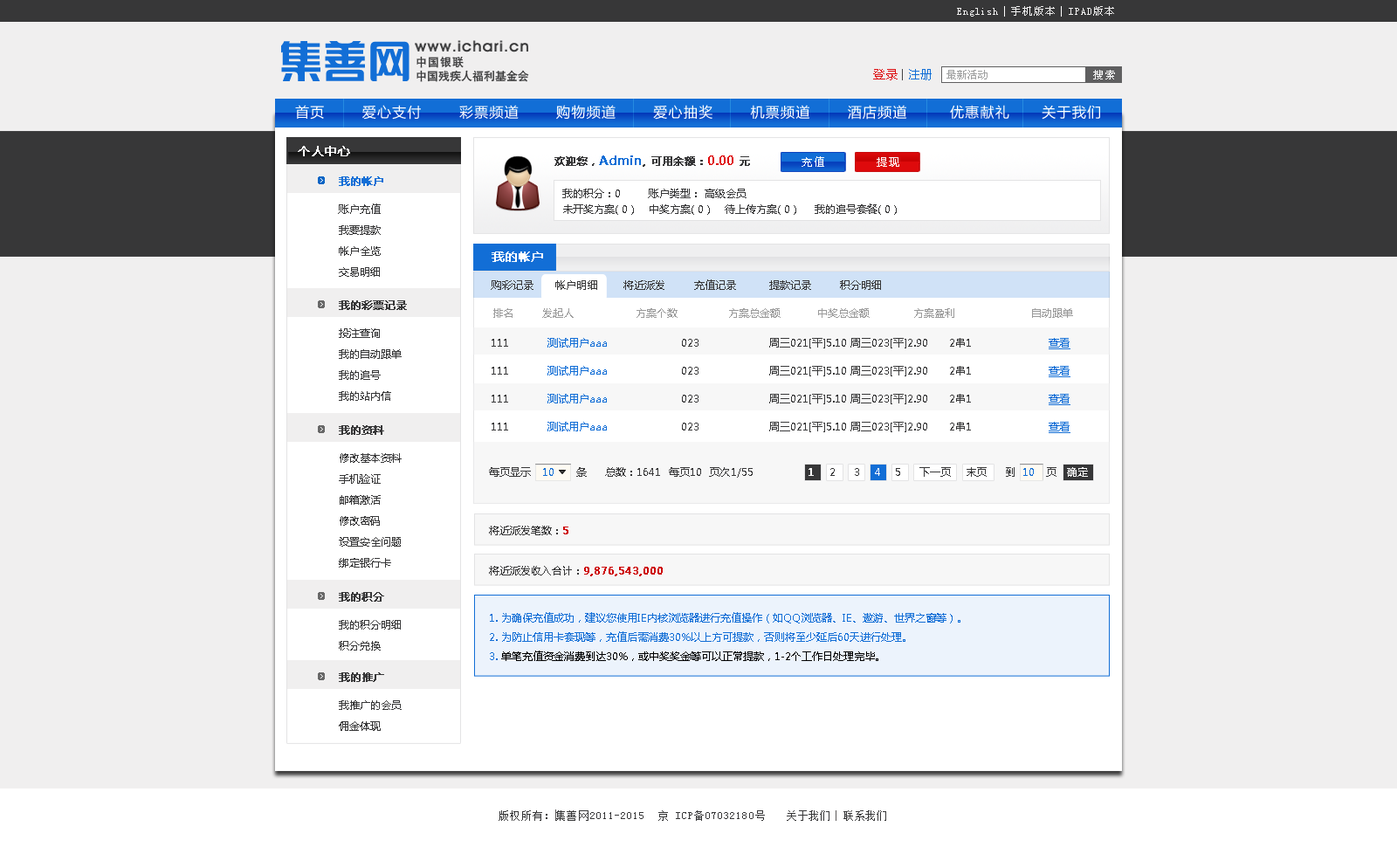
<style>
.page{position:relative;width:1397px;height:854px;background:#f0efef}
.page>*{position:absolute;margin:0}
.t1{font:10.5px "SimSun";letter-spacing:0.09em;color:#f0efef}
.t2{font:10.5px "SimSun";letter-spacing:0.07em;color:#f0efef}
.t3{font:11.3px "HeitiCSEG-Medium-GB";letter-spacing:0.08em;color:#373738}
.t4{font:11.3px "HeitiCSEG-Medium-GB";color:#373738}
.t5{font:12.2px "FZLTXHK--GBK1-0";letter-spacing:0.01em;color:#dd0a0d}
.t6{font:11.3px "FZLTXHK--GBK1-0";letter-spacing:0.01em;color:#434344}
.t7{font:12.2px "FZLTXHK--GBK1-0";letter-spacing:0.01em;color:#126ed6}
.t8{font:10.5px "SimSun";color:#9fa0a0}
.t9{font:10.5px "SimSun";letter-spacing:0.16em;color:#ffffff}
.t10{font:14px "MicrosoftYaHei";letter-spacing:0.08em;color:#ffffff}
.t11{font:12.2px "MicrosoftYaHei";color:#ffffff;font-weight:bold}
.t12{font:10.5px "MicrosoftYaHei";color:#373738;font-weight:bold}
.t13{font:12.2px "MicrosoftYaHei";color:#126ed6;font-weight:bold}
.t14{font:12.2px "MicrosoftYaHei";color:#de0a0c;font-weight:bold}
.t15{font:10.5px "MicrosoftYaHei";letter-spacing:0.14em;color:#ffffff}
.t16{font:10.5px "MicrosoftYaHei";color:#126ed6;font-weight:bold}
.t17{font:10.5px/15.7px "MicrosoftYaHei";color:#373738}
.t18{font:10.5px/21px "MicrosoftYaHei";color:#373738}
.t19{font:12.2px "MicrosoftYaHei";letter-spacing:0.01em;color:#ffffff;font-weight:bold}
.t20{font:10.5px "MicrosoftYaHei";letter-spacing:0.01em;color:#373738}
.t21{font:10.5px "MicrosoftYaHei";letter-spacing:0.01em;color:#9b9b9b}
.t22{font:10.5px "MicrosoftYaHei";color:#373738}
.t23{font:10.5px "MicrosoftYaHei";color:#126ed6}
.t24{font:10.5px "MicrosoftYaHei";color:#126ed6;text-decoration:underline}
.t25{font:10.5px "MicrosoftYaHei";letter-spacing:0.01em;color:#126ed6}
.t26{font:10.5px "MicrosoftYaHei";letter-spacing:0.01em;color:#ffffff;font-weight:bold}
.t27{font:10.5px "MicrosoftYaHei";letter-spacing:0.01em;color:#ffffff}
.t28{font:10.5px "MicrosoftYaHei";color:#cd0406;font-weight:bold}
.t29{font:10.5px/19.2px "MicrosoftYaHei";color:#126ed6}
.t30{font:10.5px/19.2px "MicrosoftYaHei";color:#000000}
.t31{font:10.5px "SimSun";letter-spacing:0.09em;color:#373738}
.t32{font:10.5px "SimSun";letter-spacing:0.07em;color:#373738}
</style>
<div class="page">
<p class="t1" style="left:957px;top:6px;width:157px;height:11px"><span class="t2">English  </span>手机版本  IPAD版本</p>
<p class="t3" style="left:416px;top:56px;width:48px;height:12px">中国银联</p>
<p class="t4" style="left:416px;top:70px;width:113px;height:12px">中国残疾人福利基金会</p>
<p class="t5" style="left:873px;top:69px;width:58px;height:11px">登录 <span class="t6">| </span><span class="t7">注册</span></p>
<p class="t8" style="left:946px;top:70px;width:41px;height:9px">最新活动</p>
<p class="t9" style="left:1093px;top:70px;width:22px;height:9px">搜索</p>
<p class="t10" style="left:295px;top:105px;width:805px;height:15px">首页       爱心支付       彩票频道       购物频道       爱心抽奖       机票频道       酒店频道        优惠献礼      关于我们</p>
<p class="t11" style="left:298px;top:146px;width:52px;height:10px">个人中心</p>
<p class="t12" style="left:554px;top:155px;width:196px;height:12px">欢迎您，<span class="t13">Admin</span>, 可用余额：<span class="t14">0.00 </span>元</p>
<p class="t15" style="left:801px;top:156px;width:23px;height:11px">充值</p>
<p class="t15" style="left:876px;top:157px;width:23px;height:10px">提现</p>
<p class="t16" style="left:339px;top:176px;width:44px;height:10px">我的帐户</p>
<p class="t17" style="left:562px;top:189px;width:335px;height:26px">我的积分：0        账户类型： 高级会员    <br>未开奖方案( 0 )    中奖方案( 0 )    待上传方案( 0 )     我的追号套餐( 0 )</p>
<p class="t18" style="left:338px;top:203px;width:43px;height:74px">账户充值<br>我要提款 <br>帐户全览 <br>交易明细</p>
<p class="t19" style="left:491px;top:251px;width:52px;height:11px">我的帐户</p>
<p class="t20" style="left:491px;top:279px;width:390px;height:11px">购彩记录      帐户明细       将近派发        充值记录         提款记录        积分明细</p>
<p class="t12" style="left:339px;top:300px;width:68px;height:10px">我的彩票记录</p>
<p class="t21" style="left:493px;top:308px;width:580px;height:10px">排名        发起人                 方案个数              方案总金额          中奖总金额            方案盈利                     自动跟单</p>
<p class="t18" style="left:339px;top:328px;width:63px;height:73px">投注查询<br>我的自动跟单<br>我的追号<br>我的站内信</p>
<p class="t22" style="left:491px;top:338px;width:579px;height:11px">111           <span class="t23">测试用户aaa </span>                    023                    周三021[平]5.10 周三023[平]2.90      2串1                      <span class="t24">查看</span></p>
<p class="t22" style="left:491px;top:366px;width:579px;height:11px">111           <span class="t23">测试用户aaa </span>                    023                    周三021[平]5.10 周三023[平]2.90      2串1                      <span class="t24">查看</span></p>
<p class="t22" style="left:491px;top:394px;width:579px;height:11px">111           <span class="t23">测试用户aaa </span>                    023                    周三021[平]5.10 周三023[平]2.90      2串1                      <span class="t24">查看</span></p>
<p class="t12" style="left:339px;top:425px;width:45px;height:10px">我的资料</p>
<p class="t22" style="left:491px;top:422px;width:579px;height:11px">111           <span class="t23">测试用户aaa </span>                    023                    周三021[平]5.10 周三023[平]2.90      2串1                      <span class="t24">查看</span></p>
<p class="t18" style="left:339px;top:453px;width:63px;height:114px">修改基本资料<br>手机验证<br>邮箱激活<br>修改密码<br>设置安全问题<br>绑定银行卡</p>
<p class="t20" style="left:489px;top:467px;width:599px;height:11px">每页显示   <span class="t25">10</span>      条     总数：1641  每页10  页次1/55               <span class="t26">1 </span>   2     3   <span class="t27"> 4</span>    5     下一页    末页     到  <span class="t25">10 </span>  页   <span class="t27">确定</span></p>
<p class="t22" style="left:489px;top:526px;width:79px;height:9px">将近派发笔数：<span class="t28">5</span></p>
<p class="t28" style="left:489px;top:566px;width:174px;height:10px"><span class="t22">将近派发收入合计：</span>9,876,543,000</p>
<p class="t12" style="left:339px;top:592px;width:45px;height:9px">我的积分</p>
<p class="t29" style="left:490px;top:612px;width:470px;height:49px">1. 为确保充值成功，建议您使用IE内核浏览器进行充值操作（如QQ浏览器、IE、遨游、世界之窗等）。<br>2. 为防止信用卡套现等，充值后需消费30%以上方可提款，否则将至少延后60天进行处理。<br>3. <span class="t30">单笔充值资金消费到达30%，或中奖奖金等可以正常提款，1-2个工作日处理完毕。</span></p>
<p class="t18" style="left:339px;top:620px;width:62px;height:30px">我的积分明细<br>积分兑换</p>
<p class="t12" style="left:339px;top:672px;width:45px;height:10px">我的推广</p>
<p class="t18" style="left:339px;top:700px;width:63px;height:31px">我推广的会员<br>佣金体现</p>
<p class="t31" style="left:498px;top:810px;width:267px;height:11px">版权所有：集善网2011-2015  京 ICP备07032180号</p>
<p class="t32" style="left:787px;top:810px;width:99px;height:11px">关于我们  联系我们</p>
</div>
